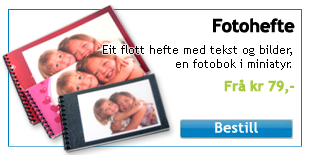
<style>
.page{position:relative;width:309px;height:155px;background:#ffffff}
.page>*{position:absolute;margin:0}
.t1{font:18px "TrebuchetMS-Bold";letter-spacing:-0.025em;color:#010101;font-weight:bold}
.t2{font:12px "TrebuchetMS";color:#000000}
.t3{font:14px "TrebuchetMS-Bold";letter-spacing:-0.025em;color:#a8ca3f;font-weight:bold}
.t4{font:14px "TrebuchetMS";color:#fafbf8;font-weight:bold;scale:1.06 1}
</style>
<div class="page">
<p class="t1" style="left:213px;top:18px;width:82px;height:15px">Fotohefte</p>
<p class="t2" style="left:103px;top:45px;width:189px;height:25px;text-align:right">Eit flott hefte med tekst og bilder,<br>en fotobok i miniatyr.</p>
<p class="t3" style="left:224px;top:79px;width:71px;height:15px">Frå kr 79,-</p>
<p class="t4" style="left:215px;top:122px;width:43px;height:11px">Bestill</p>
</div>
